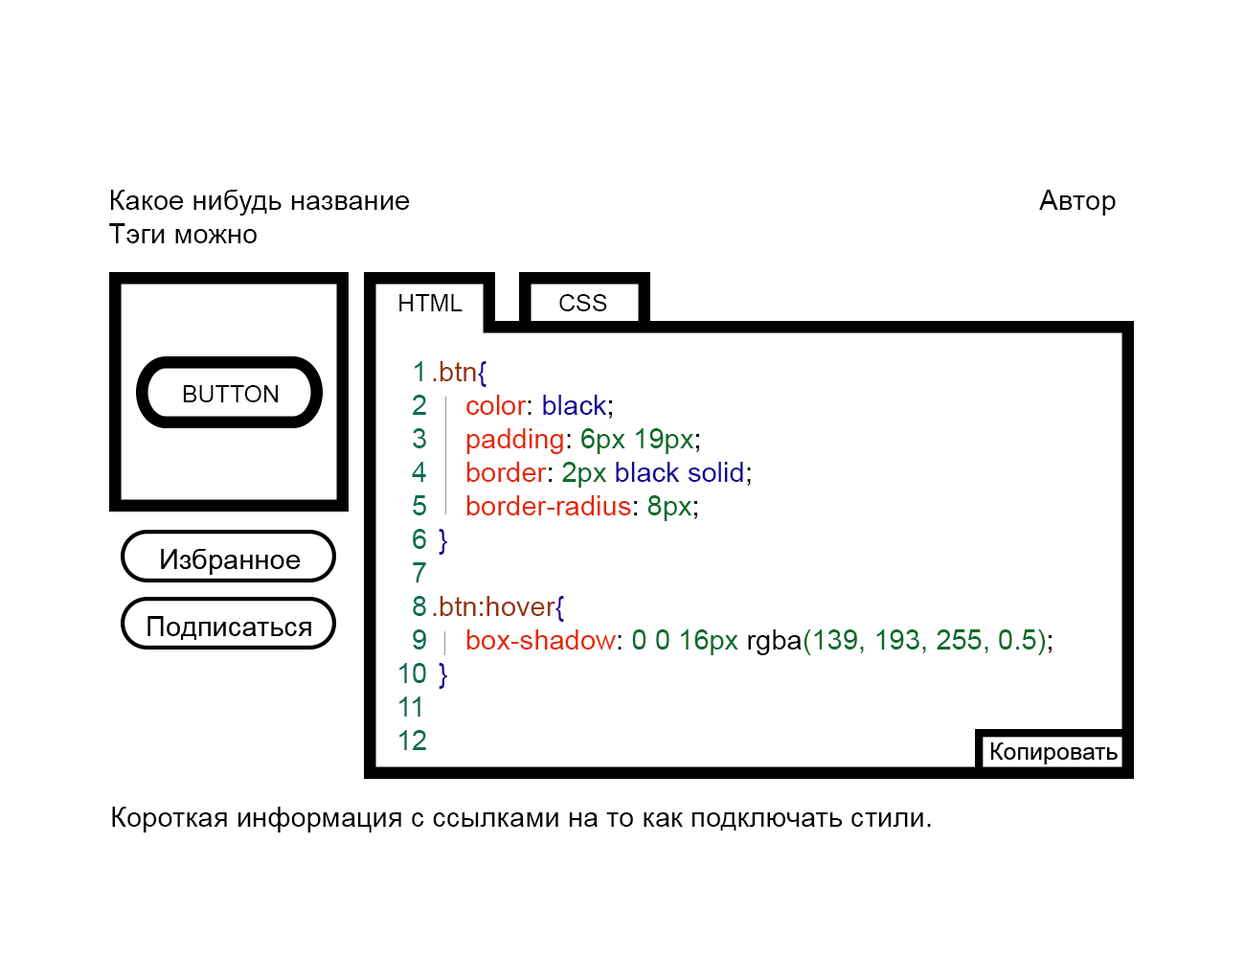
<style>
.page{position:relative;width:1245px;height:958px;background:#ffffff}
.page>*{position:absolute;margin:0}
.t1{font:27.9px "ArialMT";color:#000000}
.t2{font:27.9px "ArialMT";color:#056c29}
.t3{font:27.9px "ArialMT";color:#056c55}
.t4{font:27.9px "ArialMT";color:#94340e}
.t5{font:27.9px "ArialMT";color:#110696}
.t6{font:27.9px "ArialMT";color:#e72600}
</style>
<div class="page">
<p class="t1" style="left:109px;top:190px;width:1007px;height:53px;text-align:right">Какое нибудь название                    Автор<br>Тэги можно</p>
<p class="t2" style="left:399px;top:361px;width:653px;height:389px;text-align:right"><span class="t3">  1</span><span class="t4"> .btn</span><span class="t5">{<br></span><span class="t3">  2  </span><span class="t6">color</span><span class="t1">: </span><span class="t5">black</span><span class="t1">;<br></span><span class="t3">  3  </span><span class="t6">padding</span><span class="t1">: </span>6px 19px<span class="t1">;<br></span><span class="t3">  4  </span><span class="t6">border</span><span class="t1">: </span>2px <span class="t5">black solid</span><span class="t1">;<br></span><span class="t3">  5  </span><span class="t6">border-radius</span><span class="t1">: </span>8px<span class="t1">;<br></span><span class="t3">  6</span><span class="t5">  }<br></span><span class="t3">  7<br>  8</span><span class="t4"> .btn:hover</span><span class="t5">{<br></span><span class="t3">  9  </span><span class="t6">box-shadow</span><span class="t1">: </span>0 0 16px<span class="t1"> rgba</span>(139, 193, 255, 0.5)<span class="t1">;<br></span><span class="t3">10</span><span class="t5">  }<br></span><span class="t3">11<br>12</span></p>
<p class="t1" style="left:112px;top:806px;width:819px;height:26px">Короткая информация с ссылками на то как подключать стили.</p>
</div>
